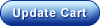
<style>
.page{position:relative;width:100px;height:26px}
.page>*{position:absolute;margin:0}
.t1{font:12px "Arial-BoldMT";letter-spacing:0.05em;color:#ffffff}
</style>
<div class="page">
<p class="t1" style="left:13px;top:8px;width:73px;height:12px">Update Cart</p>
</div>
